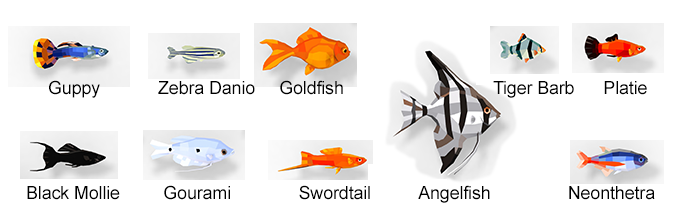
<style>
.page{position:relative;width:700px;height:220px;background:#ffffff}
.page>*{position:absolute;margin:0}
.t1{font:18px "ArialMT";letter-spacing:-0.01em;color:#000000}
</style>
<div class="page">
<p class="t1" style="left:49px;top:80px;width:598px;height:18px">Guppy            Zebra Danio     Goldfish                               Tiger Barb      Platie</p>
<p class="t1" style="left:27px;top:185px;width:628px;height:18px">Black Mollie         Gourami              Swordtail          Angelfish                Neonthetra</p>
</div>
